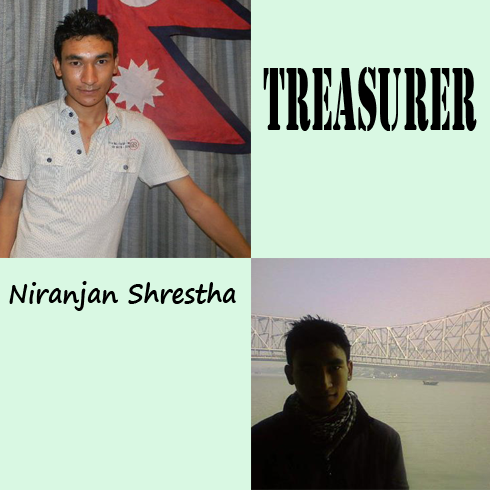
<style>
.page{position:relative;width:490px;height:490px;background:#d9f8e3}
.page>*{position:absolute;margin:0}
.t1{font:93.3px "Stencil";color:#000000;scale:0.4 1}
.t2{font:26.7px "SegoePrint-Bold";color:#000000;scale:0.93 1}
</style>
<div class="page">
<p class="t1" style="left:263px;top:67px;width:214px;height:64px">TREASURER</p>
<p class="t2" style="left:9px;top:281px;width:227px;height:30px">Niranjan Shrestha</p>
</div>
